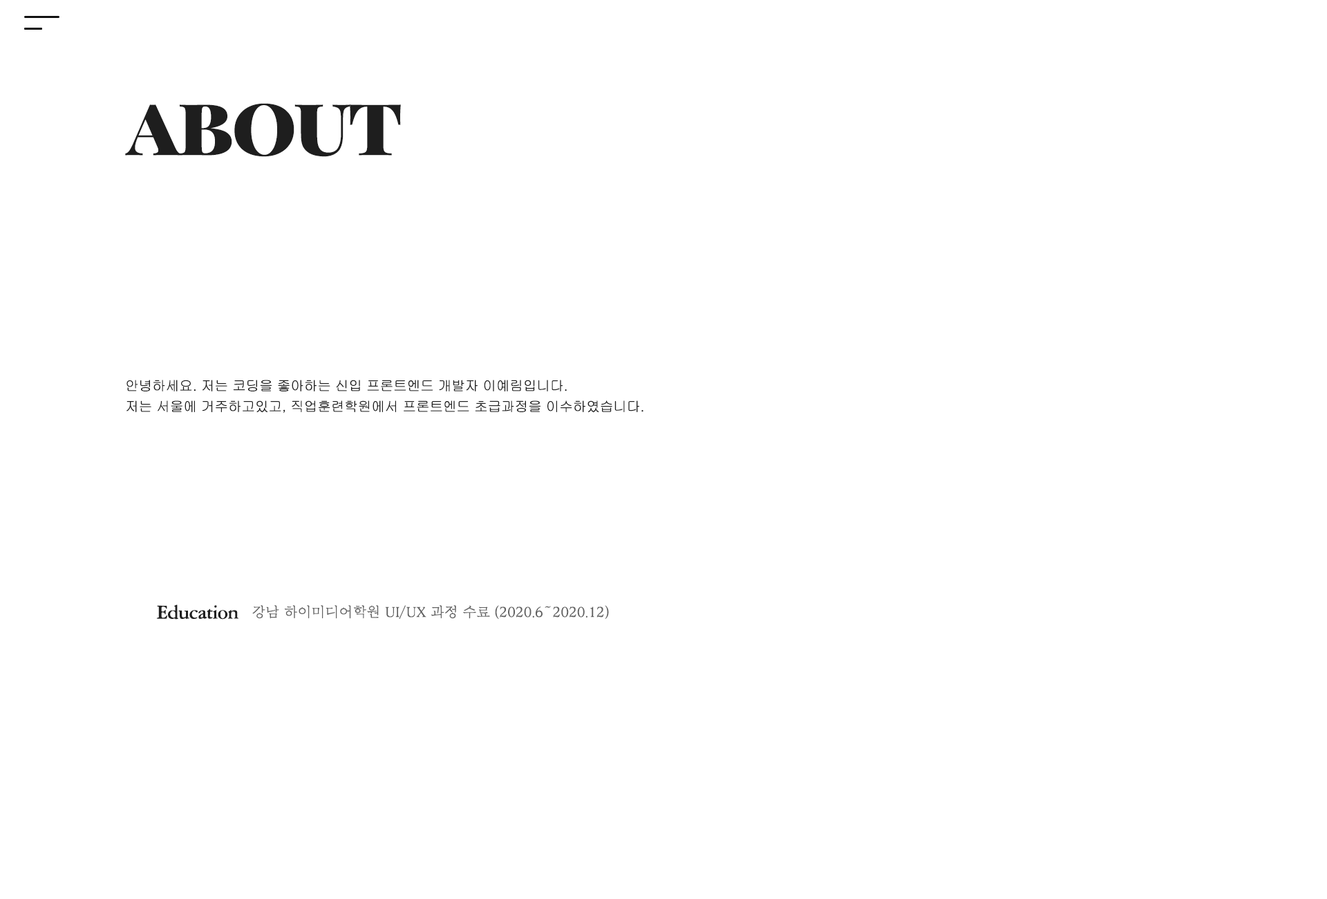
<style>
.page{position:relative;width:1327px;height:899px;background:#ffffff}
.page>*{position:absolute;margin:0}
.t1{font:82.9px "PlayfairDisplaySC-Black";letter-spacing:-0.025em;color:#1e1e1e}
.t2{font:13.8px/20.7px "Gulim";letter-spacing:-0.025em;color:#1f1f1f}
.t3{font:20.7px "AmeriGarmnd-BTBold";letter-spacing:-0.025em;color:#1f1f1f}
.t4{font:13.8px "Yj-DWMMOOGJO-Medium";letter-spacing:-0.025em;color:#616161}
</style>
<div class="page">
<p class="t1" style="left:125px;top:103px;width:276px;height:54px">about</p>
<p class="t2" style="left:126px;top:379px;width:517px;height:34px">안녕하세요. 저는 코딩을 좋아하는 신입 프론트엔드 개발자 이예림입니다.<br>저는 서울에 거주하고있고, 직업훈련학원에서 프론트엔드 초급과정을 이수하였습니다.</p>
<p class="t3" style="left:156px;top:604px;width:83px;height:15px">Education</p>
<p class="t4" style="left:252px;top:605px;width:357px;height:14px">강남 하이미디어학원 UI/UX 과정 수료 (2020.6~2020.12)</p>
</div>
